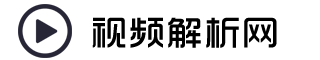
<style>
.page{position:relative;width:320px;height:60px;background:#ffffff}
.page>*{position:absolute;margin:0}
.t1{font:36px "TRENDS";letter-spacing:0.05em;color:#000000}
</style>
<div class="page">
<p class="t1" style="left:92px;top:17px;width:185px;height:31px">视频解析网</p>
</div>
